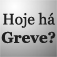
<style>
.page{position:relative;width:57px;height:57px}
.page>*{position:absolute;margin:0}
.t1{font:15.3px "Georgia";color:#1f1f1f}
.t2{font:15.3px "Georgia-Bold";color:#1f1f1f}
</style>
<div class="page">
<p class="t1" style="left:1px;top:12px;width:55px;height:32px;text-align:center">Hoje há<br><span class="t2">Greve?</span></p>
</div>
